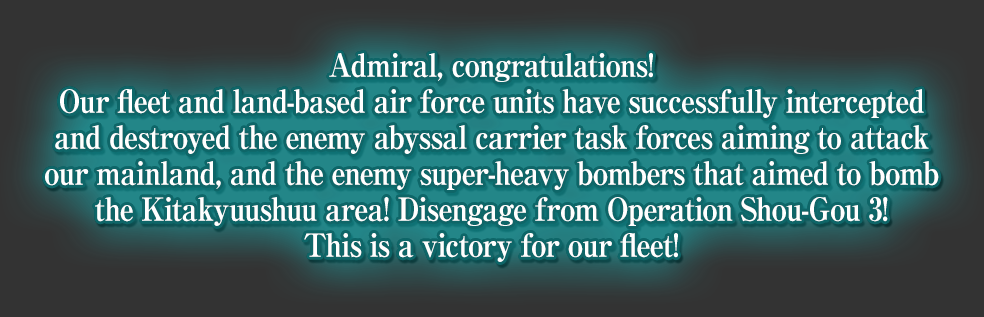
<style>
.page{position:relative;width:984px;height:317px;background:#333333}
.page>*{position:absolute;margin:0}
.t1{font:32px/36px "RyuminPro-ExBold";letter-spacing:-0.04em;color:#ffffff;scale:0.9 1}
</style>
<div class="page">
<p class="t1" style="left:45px;top:53px;width:894px;height:209px;text-align:center">Admiral, congratulations!<br>Our fleet and land-based air force units have successfully intercepted<br>and destroyed the enemy abyssal carrier task forces aiming to attack<br>our mainland, and the enemy super-heavy bombers that aimed to bomb<br>the Kitakyuushuu area! Disengage from Operation Shou-Gou 3!<br>This is a victory for our fleet!</p>
</div>
